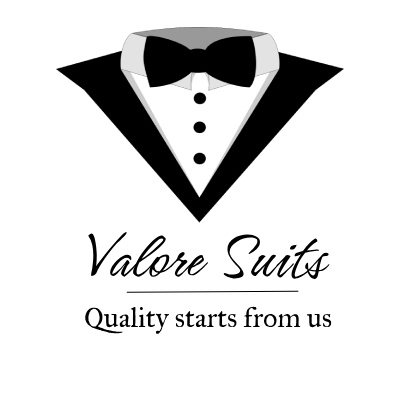
<style>
.page{position:relative;width:400px;height:400px;background:#ffffff}
.page>*{position:absolute;margin:0}
.t1{font:70px "Hurricane-Regular";color:#000000}
.t2{font:28px "IM_FELL_Great_Primer_PRO_Roman";color:#000000}
</style>
<div class="page">
<p class="t1" style="left:88px;top:231px;width:242px;height:48px">Valore Suits</p>
<p class="t2" style="left:85px;top:306px;width:247px;height:28px">Quality starts from us</p>
</div>
